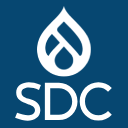
<style>
.page{position:relative;width:128px;height:128px;background:#064771}
.page>*{position:absolute;margin:0}
.t1{font:53px "ZTGatha-SemiBold";color:#ffffff}
</style>
<div class="page">
<p class="t1" style="left:15px;top:82px;width:97px;height:39px">SDC</p>
</div>
